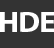
<style>
.page{position:relative;width:54px;height:48px;background:#333333}
.page>*{position:absolute;margin:0}
.t1{font:28.8px "MyriadPro-Bold";letter-spacing:-0.025em;color:#ffffff;scale:1.08 1}
</style>
<div class="page">
<p class="t1" style="left:0px;top:12px;width:55px;height:20px">HDE</p>
</div>
